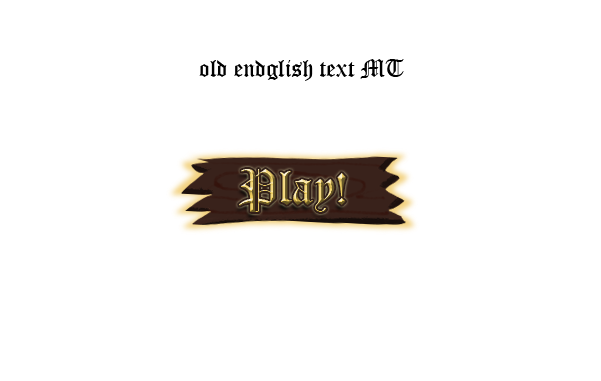
<style>
.page{position:relative;width:601px;height:381px;background:#ffffff}
.page>*{position:absolute;margin:0}
.t1{font:24px "OldEnglishTextMT";color:#000000}
.t2{font:48px "OldEnglishTextMT"}
</style>
<div class="page">
<p class="t1" style="left:199px;top:59px;width:205px;height:22px">old endglish text MT</p>
<p class="t2" style="left:239px;top:169px;width:107px;height:43px">Play!</p>
</div>
